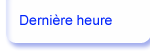
<style>
.page{position:relative;width:150px;height:54px;background:#fefefe}
.page>*{position:absolute;margin:0}
.t1{font:14px "ArialMT";color:#0326fb}
</style>
<div class="page">
<p class="t1" style="left:20px;top:14px;width:92px;height:11px">Dernière heure</p>
</div>
